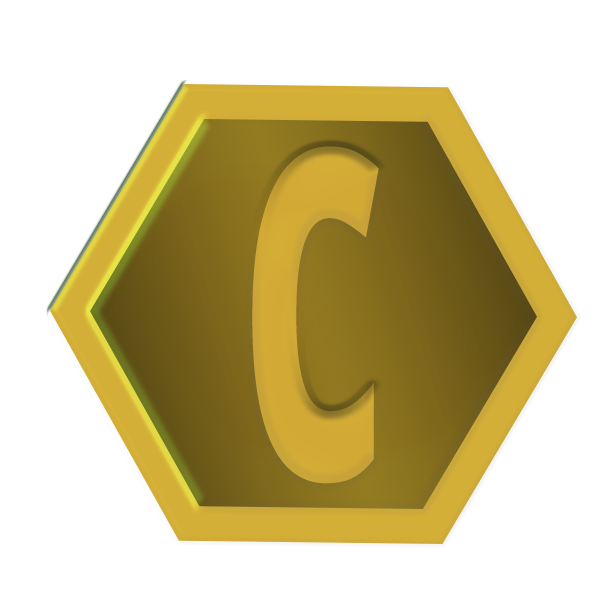
<style>
.page{position:relative;width:600px;height:600px;background:#ffffff}
.page>*{position:absolute;margin:0}
.t1{font:594.8px "OpenSans-Bold";letter-spacing:0.1em;color:#d4af37;scale:0.48 1}
</style>
<div class="page">
<p class="t1" style="left:252px;top:146px;width:127px;height:338px">c</p>
</div>
